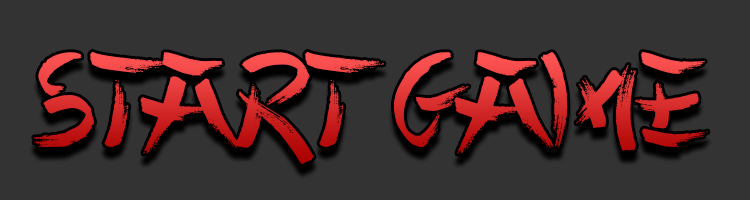
<style>
.page{position:relative;width:750px;height:200px;background:#333333}
.page>*{position:absolute;margin:0}
.t1{font:134.7px "ChineseTakeaway";scale:1.07 1}
</style>
<div class="page">
<p class="t1" style="left:34px;top:51px;width:674px;height:113px">Start Game</p>
</div>
